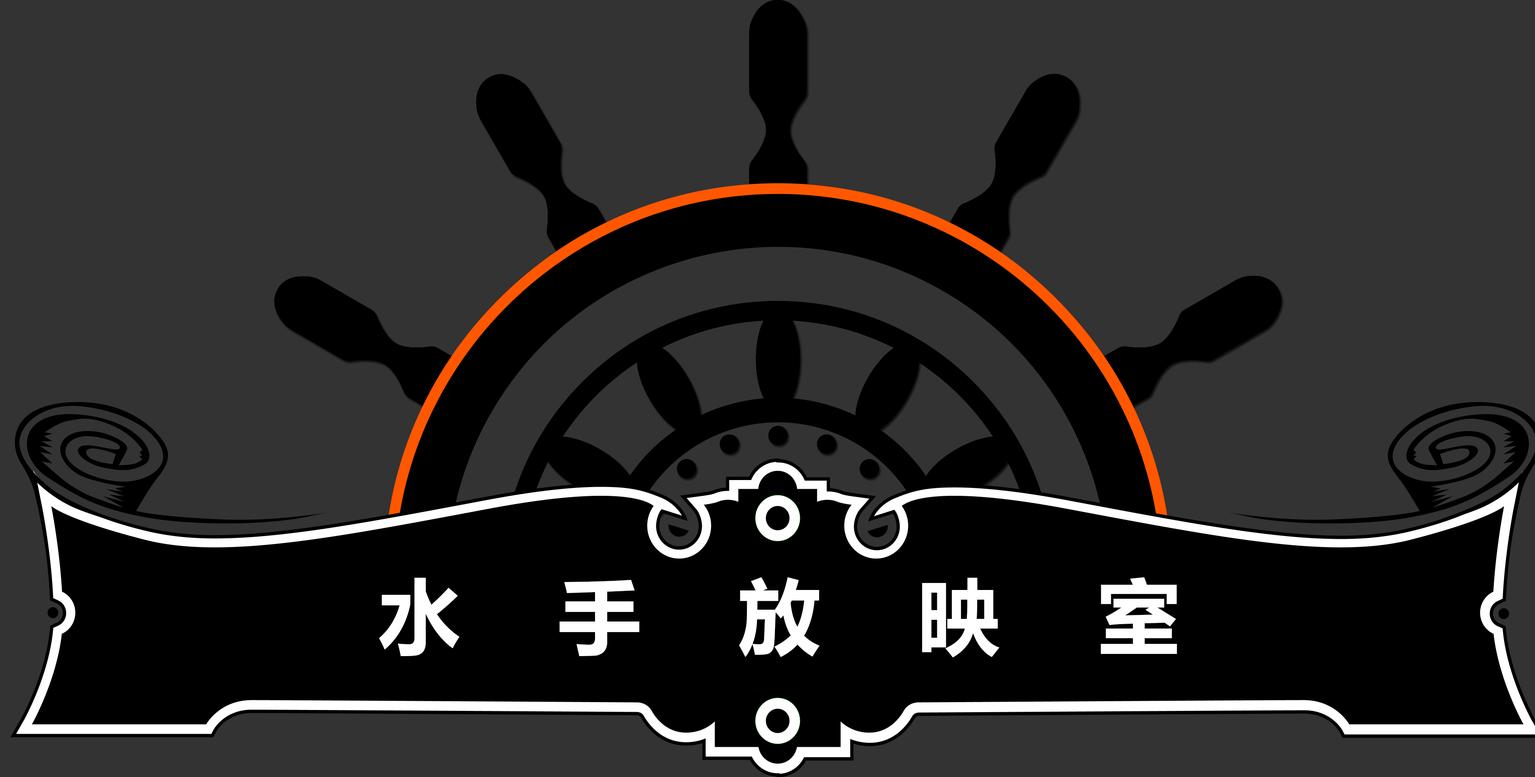
<style>
.page{position:relative;width:1535px;height:777px;background:#333333}
.page>*{position:absolute;margin:0}
.t1{font:82.1px "MicrosoftYaHei-Bold";color:#ffffff}
</style>
<div class="page">
<p class="t1" style="left:379px;top:577px;width:798px;height:80px">水    手    放    映    室</p>
</div>
